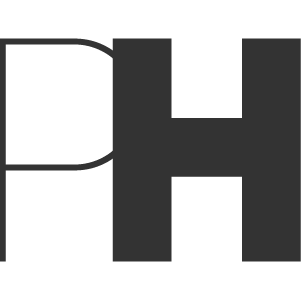
<style>
.page{position:relative;width:301px;height:301px;background:#ffffff}
.page>*{position:absolute;margin:0}
.t1{font:297px "SlimJoe";color:#333333}
.t2{font:297px "BigJohn";color:#333333}
</style>
<div class="page">
<p class="t1" style="left:0px;top:38px;width:142px;height:224px">P</p>
<p class="t2" style="left:112px;top:38px;width:189px;height:224px">H</p>
</div>
